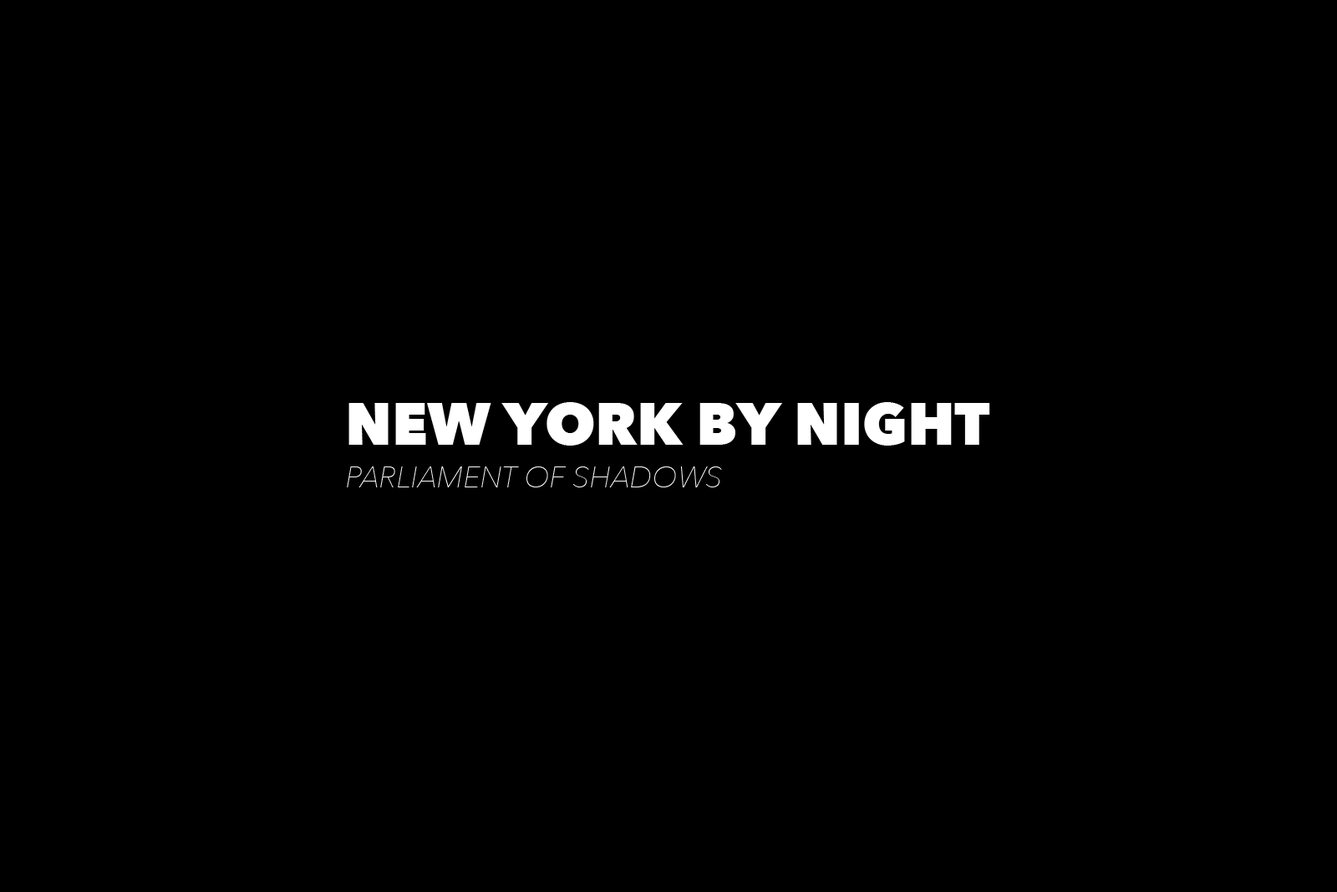
<style>
.page{position:relative;width:1337px;height:892px;background:#000000}
.page>*{position:absolute;margin:0}
.t1{font:58.7px "AvenirNext-Heavy";color:#ffffff}
.t2{font:29.4px "AvenirNext-UltraLightItalic";color:#ffffff}
</style>
<div class="page">
<p class="t1" style="left:349px;top:402px;width:641px;height:43px">NEW YORK BY NIGHT</p>
<p class="t2" style="left:347px;top:466px;width:375px;height:21px">PARLIAMENT OF SHADOWS</p>
</div>
